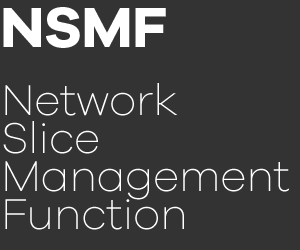
<style>
.page{position:relative;width:300px;height:250px;background:#333333}
.page>*{position:absolute;margin:0}
.t1{font:58.5px "GalanoGrotesque-Bold";letter-spacing:-0.01em;color:#ffffff}
.t2{font:44.5px/38px "GalanoGrotesque-ExtraLight";letter-spacing:-0.01em;color:#ffffff}
</style>
<div class="page">
<p class="t1" style="left:3px;top:7px;width:163px;height:41px">NSMF</p>
<p class="t2" style="left:3px;top:83px;width:286px;height:147px">Network <br>Slice <br>Management<br>Function</p>
</div>
